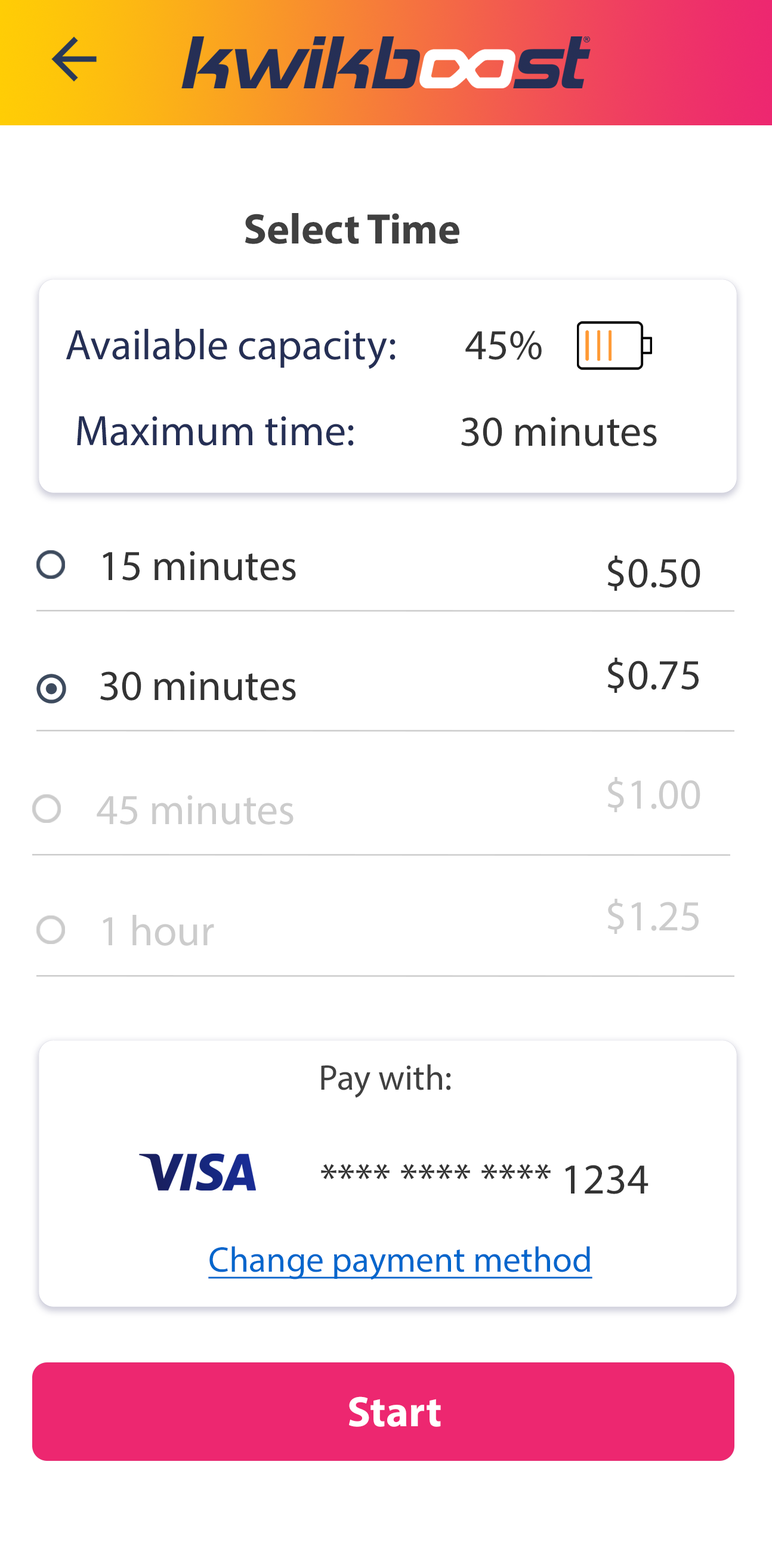
<style>
.page{position:relative;width:772px;height:1545px;background:#ffffff}
.page>*{position:absolute;margin:0}
.t1{font:43px "MyriadPro-Bold";color:#404040}
.t2{font:43px "MyriadPro-Regular";color:#252f55}
.t3{font:43px "MyriadPro-Regular";color:#333333}
.t4{font:43px "MyriadPro-Regular";color:#cccccc}
.t5{font:35.8px "MyriadPro-Regular";color:#404040}
.t6{font:35.8px "MyriadPro-Regular";color:#0066cc;text-decoration:underline}
.t7{font:43px "MyriadPro-Bold";color:#ffffff}
</style>
<div class="page">
<p class="t1" style="left:245px;top:213px;width:214px;height:31px">Select Time</p>
<p class="t2" style="left:66px;top:329px;width:330px;height:40px">Available capacity:</p>
<p class="t3" style="left:465px;top:331px;width:77px;height:29px">45%</p>
<p class="t2" style="left:77px;top:416px;width:277px;height:30px">Maximum time:</p>
<p class="t3" style="left:461px;top:416px;width:196px;height:30px">30 minutes</p>
<p class="t3" style="left:103px;top:551px;width:193px;height:29px">15 minutes</p>
<p class="t3" style="left:607px;top:555px;width:93px;height:36px">$0.50</p>
<p class="t3" style="left:607px;top:657px;width:92px;height:36px">$0.75</p>
<p class="t3" style="left:100px;top:671px;width:196px;height:29px">30 minutes</p>
<p class="t4" style="left:607px;top:777px;width:93px;height:35px">$1.00</p>
<p class="t4" style="left:97px;top:795px;width:197px;height:30px">45 minutes</p>
<p class="t4" style="left:607px;top:898px;width:92px;height:36px">$1.25</p>
<p class="t4" style="left:103px;top:915px;width:111px;height:31px">1 hour</p>
<p class="t5" style="left:321px;top:1064px;width:130px;height:34px">Pay with:</p>
<p class="t3" style="left:321px;top:1163px;width:328px;height:31px">**** **** **** 1234</p>
<p class="t6" style="left:208px;top:1246px;width:384px;height:34px">Change payment method</p>
<p class="t7" style="left:349px;top:1396px;width:92px;height:30px">Start</p>
</div>
